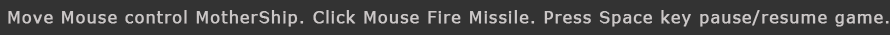
<style>
.page{position:relative;width:890px;height:35px;background:#333333}
.page>*{position:absolute;margin:0}
.t1{font:16px "Verdana";letter-spacing:0.01em;color:#cbc7c7;font-weight:bold}
</style>
<div class="page">
<p class="t1" style="left:8px;top:10px;width:881px;height:17px">Move Mouse control MotherShip. Click Mouse Fire Missile. Press Space key pause/resume game.</p>
</div>
